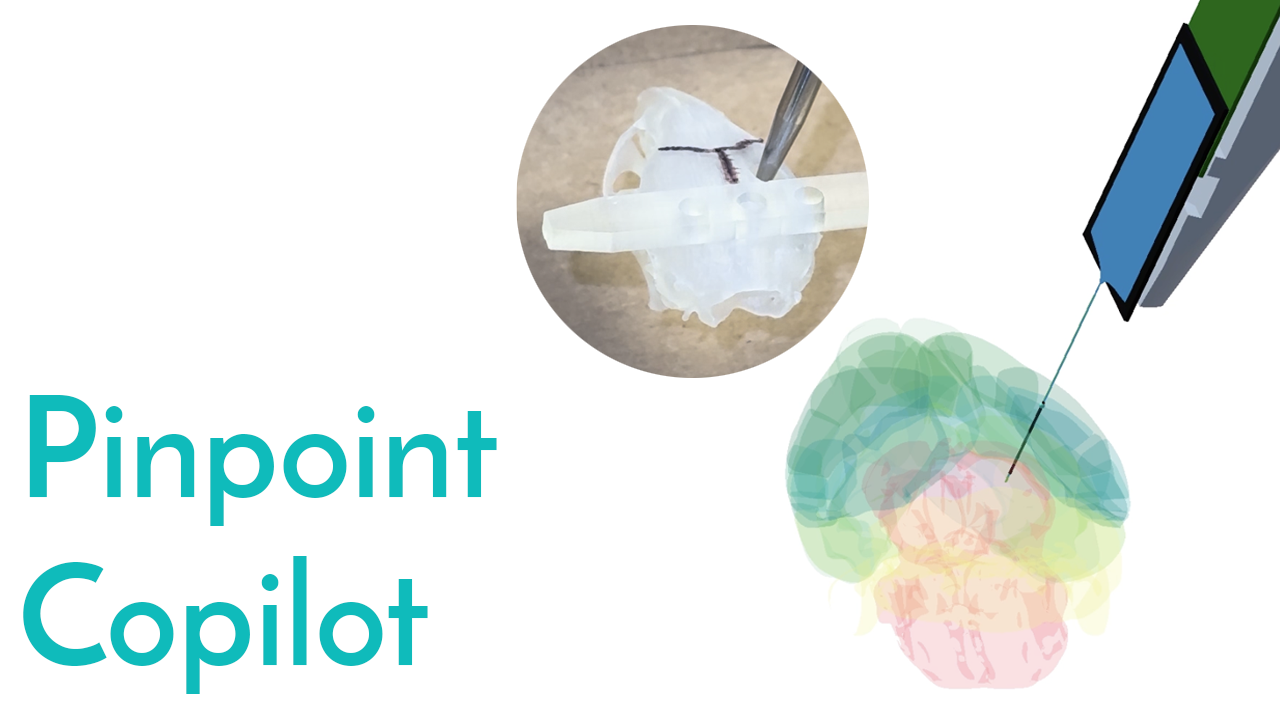
<style>
.page{position:relative;width:1280px;height:720px;background:#ffffff}
.page>*{position:absolute;margin:0}
.t1{font:140px "JosefinSans-Bold";color:#0fbbbb}
</style>
<div class="page">
<p class="t1" style="left:23px;top:395px;width:474px;height:299px">Pinpoint<br>Copilot</p>
</div>
